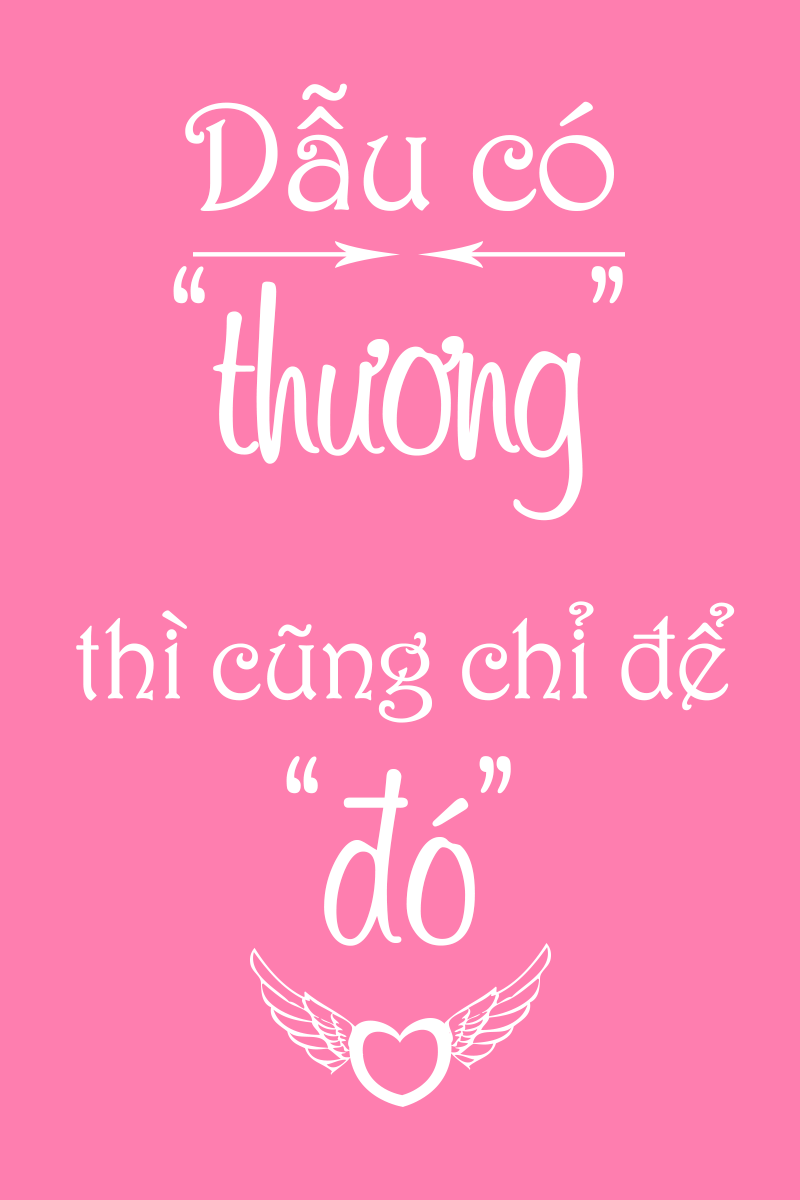
<style>
.page{position:relative;width:800px;height:1200px;background:#fe7eaf}
.page>*{position:absolute;margin:0}
.t1{font:112px/245px "Vf-Harrington";letter-spacing:-0.025em;color:#ffffff}
.t2{font:150px/303px "Vf-Harrington";letter-spacing:-0.025em;color:#ffffff}
.t3{font:250px/245px "Vf-Murray";letter-spacing:-0.025em;color:#ffffff}
</style>
<div class="page">
<p class="t1" style="left:76px;top:83px;width:659px;height:863px;text-align:center"><span class="t2">Dẫu có <br></span><span class="t3">“thương” <br></span>thì cũng chỉ để <br><span class="t3">“đó”</span></p>
</div>
